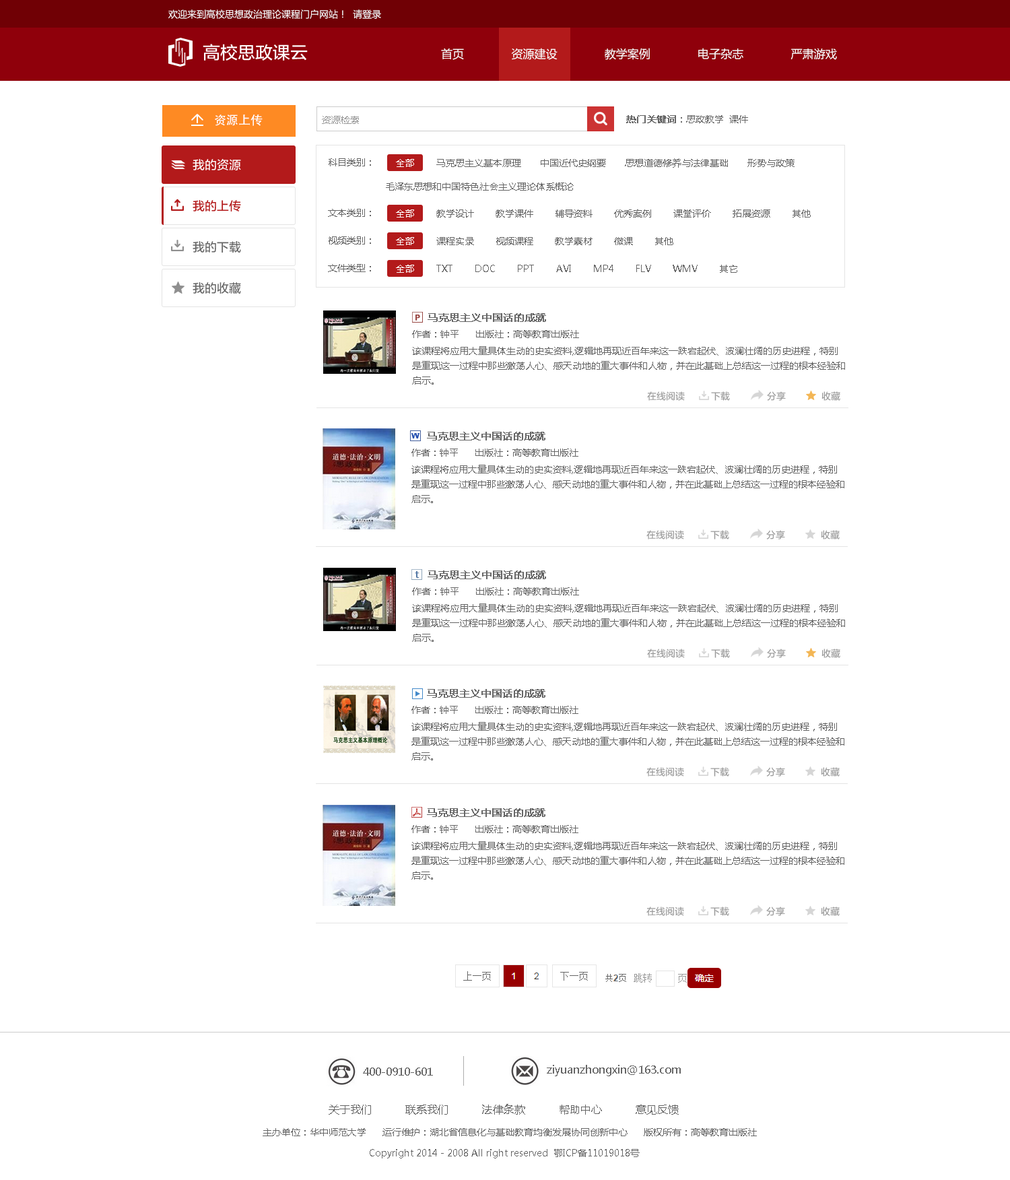
<style>
.page{position:relative;width:1010px;height:1180px;background:#ffffff}
.page>*{position:absolute;margin:0}
.t1{font:9.4px "MicrosoftYaHei";color:#ffffff}
.t2{font:17.5px "FZLTZHUNHK--GBK1-0";color:#ffffff}
.t3{font:11.5px "MicrosoftYaHei";color:#ffffff}
.t4{font:12.1px "AdobeHeitiStd-Regular";color:#ffffff}
.t5{font:9.4px "MicrosoftYaHei";color:#999999}
.t6{font:9.4px "MicrosoftYaHei";color:#666666}
.t7{font:9.4px "MicrosoftYaHei";color:#666666;font-weight:bold}
.t8{font:12.1px "FZLTZHUNHK--GBK1-0";color:#ffffff}
.t9{font:9.4px/23.6px "MicrosoftYaHei";color:#666666}
.t10{font:9.4px/23.6px "MicrosoftYaHei";color:#ffffff}
.t11{font:12.1px "FZLTZHUNHK--GBK1-0";color:#b31a1b}
.t12{font:12.1px "FZLTZHUNHK--GBK1-0";color:#666666}
.t13{font:10.1px "MicrosoftYaHei";color:#666666;font-weight:bold}
.t14{font:9.4px/14.8px "MicrosoftYaHei";color:#666666}
.t15{font:9.4px "FZLTZHUNHK--GBK1-0";color:#999999}
.t16{font:10.8px "MicrosoftYaHei";color:#666666}
</style>
<div class="page">
<p class="t1" style="left:168px;top:9px;width:213px;height:10px">欢迎来到高校思想政治理论课程门户网站！  请登录</p>
<p class="t2" style="left:203px;top:44px;width:105px;height:17px">高校思政课云</p>
<p class="t3" style="left:441px;top:48px;width:396px;height:12px">首页              资源建设              教学案例              电子杂志              严肃游戏</p>
<p class="t4" style="left:215px;top:115px;width:48px;height:11px">资源上传</p>
<p class="t5" style="left:322px;top:116px;width:37px;height:8px">资源检索</p>
<p class="t6" style="left:626px;top:115px;width:122px;height:8px"><span class="t7">热门关键词</span>：思政教学  课件</p>
<p class="t8" style="left:193px;top:159px;width:48px;height:12px">我的资源</p>
<p class="t6" style="left:329px;top:158px;width:42px;height:8px">科目类别：</p>
<p class="t9" style="left:386px;top:158px;width:409px;height:33px"><span class="t10">全部</span>        马克思主义基本原理       中国近代史纲要       思想道德修养与法律基础       形势与政策<br>毛泽东思想和中国特色社会主义理论体系概论</p>
<p class="t11" style="left:193px;top:200px;width:48px;height:12px">我的上传</p>
<p class="t6" style="left:328px;top:209px;width:43px;height:8px">文本类别：</p>
<p class="t6" style="left:396px;top:209px;width:415px;height:9px"><span class="t1">全部</span>        教学设计        教学课件        辅导资料        优秀案例        课堂评价        拓展资源        其他</p>
<p class="t12" style="left:193px;top:241px;width:48px;height:12px">我的下载</p>
<p class="t6" style="left:329px;top:236px;width:42px;height:9px">视频类别：</p>
<p class="t6" style="left:396px;top:237px;width:278px;height:8px"><span class="t1">全部</span>        课程实录        视频课程        教学素材        微课        其他</p>
<p class="t6" style="left:328px;top:264px;width:43px;height:8px">文件类型：</p>
<p class="t6" style="left:396px;top:265px;width:342px;height:8px"><span class="t1">全部</span>        TXT        DOC        PPT        AVI        MP4        FLV        WMV        其它</p>
<p class="t12" style="left:193px;top:282px;width:48px;height:12px">我的收藏</p>
<p class="t13" style="left:428px;top:313px;width:118px;height:9px">马克思主义中国话的成就</p>
<p class="t6" style="left:412px;top:330px;width:167px;height:8px">作者：钟平      出版社：高等教育出版社</p>
<p class="t14" style="left:412px;top:346px;width:433px;height:39px">该课程将应用大量具体生动的史实资料,逻辑地再现近百年来这一跌宕起伏、波澜壮阔的历史进程，特别是重现这一过程中那些激荡人心、感天动地的重大事件和人物，并在此基础上总结这一过程的根本经验和启示。</p>
<p class="t15" style="left:647px;top:391px;width:38px;height:10px">在线阅读</p>
<p class="t15" style="left:711px;top:391px;width:19px;height:10px">下载</p>
<p class="t15" style="left:767px;top:391px;width:19px;height:10px">分享</p>
<p class="t15" style="left:822px;top:391px;width:19px;height:10px">收藏</p>
<p class="t13" style="left:427px;top:432px;width:119px;height:9px">马克思主义中国话的成就</p>
<p class="t6" style="left:412px;top:449px;width:167px;height:8px">作者：钟平      出版社：高等教育出版社</p>
<p class="t14" style="left:412px;top:465px;width:433px;height:38px">该课程将应用大量具体生动的史实资料,逻辑地再现近百年来这一跌宕起伏、波澜壮阔的历史进程，特别是重现这一过程中那些激荡人心、感天动地的重大事件和人物，并在此基础上总结这一过程的根本经验和启示。</p>
<p class="t15" style="left:647px;top:530px;width:37px;height:10px">在线阅读</p>
<p class="t15" style="left:711px;top:530px;width:19px;height:10px">下载</p>
<p class="t15" style="left:767px;top:530px;width:18px;height:10px">分享</p>
<p class="t15" style="left:821px;top:530px;width:19px;height:10px">收藏</p>
<p class="t13" style="left:428px;top:571px;width:118px;height:8px">马克思主义中国话的成就</p>
<p class="t6" style="left:412px;top:587px;width:167px;height:8px">作者：钟平      出版社：高等教育出版社</p>
<p class="t14" style="left:412px;top:604px;width:433px;height:38px">该课程将应用大量具体生动的史实资料,逻辑地再现近百年来这一跌宕起伏、波澜壮阔的历史进程，特别是重现这一过程中那些激荡人心、感天动地的重大事件和人物，并在此基础上总结这一过程的根本经验和启示。</p>
<p class="t15" style="left:647px;top:649px;width:38px;height:9px">在线阅读</p>
<p class="t15" style="left:711px;top:649px;width:19px;height:9px">下载</p>
<p class="t15" style="left:767px;top:649px;width:19px;height:9px">分享</p>
<p class="t15" style="left:822px;top:649px;width:19px;height:9px">收藏</p>
<p class="t13" style="left:427px;top:689px;width:119px;height:9px">马克思主义中国话的成就</p>
<p class="t6" style="left:412px;top:706px;width:167px;height:8px">作者：钟平      出版社：高等教育出版社</p>
<p class="t14" style="left:412px;top:722px;width:433px;height:38px">该课程将应用大量具体生动的史实资料,逻辑地再现近百年来这一跌宕起伏、波澜壮阔的历史进程，特别是重现这一过程中那些激荡人心、感天动地的重大事件和人物，并在此基础上总结这一过程的根本经验和启示。</p>
<p class="t15" style="left:647px;top:767px;width:37px;height:10px">在线阅读</p>
<p class="t15" style="left:711px;top:767px;width:19px;height:10px">下载</p>
<p class="t15" style="left:767px;top:767px;width:18px;height:10px">分享</p>
<p class="t15" style="left:821px;top:767px;width:19px;height:10px">收藏</p>
<p class="t13" style="left:427px;top:808px;width:119px;height:9px">马克思主义中国话的成就</p>
<p class="t6" style="left:412px;top:825px;width:167px;height:8px">作者：钟平      出版社：高等教育出版社</p>
<p class="t14" style="left:412px;top:841px;width:433px;height:39px">该课程将应用大量具体生动的史实资料,逻辑地再现近百年来这一跌宕起伏、波澜壮阔的历史进程，特别是重现这一过程中那些激荡人心、感天动地的重大事件和人物，并在此基础上总结这一过程的根本经验和启示。</p>
<p class="t15" style="left:647px;top:907px;width:37px;height:9px">在线阅读</p>
<p class="t15" style="left:711px;top:907px;width:19px;height:9px">下载</p>
<p class="t15" style="left:767px;top:907px;width:18px;height:9px">分享</p>
<p class="t15" style="left:821px;top:907px;width:19px;height:9px">收藏</p>
<p class="t16" style="left:363px;top:1068px;width:70px;height:8px">400-0910-601</p>
<p class="t16" style="left:547px;top:1065px;width:134px;height:11px">ziyuanzhongxin@163.com</p>
<p class="t16" style="left:329px;top:1104px;width:350px;height:11px">关于我们          联系我们          法律条款          帮助中心          意见反馈</p>
<p class="t6" style="left:263px;top:1128px;width:494px;height:8px">主办单位：华中师范大学      运行维护：湖北省信息化与基础教育均衡发展协同创新中心      版权所有：高等教育出版社</p>
<p class="t6" style="left:370px;top:1149px;width:270px;height:10px">Copyright 2014 - 2008 All right reserved  鄂ICP备11019018号</p>
</div>
